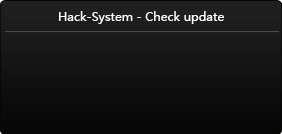
<style>
.page{position:relative;width:282px;height:134px}
.page>*{position:absolute;margin:0}
.t1{font:12px "MicrosoftYaHei";color:#ffffff}
</style>
<div class="page">
<p class="t1" style="left:59px;top:11px;width:165px;height:13px">Hack-System - Check update</p>
</div>
